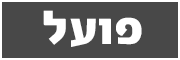
<style>
.page{position:relative;width:180px;height:60px;background:#484848}
.page>*{position:absolute;margin:0}
.t1{font:52.7px "FbAlbatros-Black";color:#ffffff}
</style>
<div class="page">
<p class="t1" style="left:43px;top:10px;width:99px;height:37px">פועל</p>
</div>
